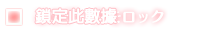
<style>
.page{position:relative;width:218px;height:30px;background:#ffffff}
.page>*{position:absolute;margin:0}
.t1{font:16px "AdobeFanHeitiStd-Bold";color:#ffffff;font-weight:bold}
</style>
<div class="page">
<p class="t1" style="left:35px;top:8px;width:82px;height:16px">鎖定此數據</p>
</div>
